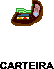
<style>
.page{position:relative;width:54px;height:69px;background:#ffffff}
.page>*{position:absolute;margin:0}
.t1{font:9.5px "Arial-BoldMT";color:#000000;scale:1.11 1}
</style>
<div class="page">
<p class="t1" style="left:0px;top:62px;width:54px;height:8px">CARTEIRA</p>
</div>
